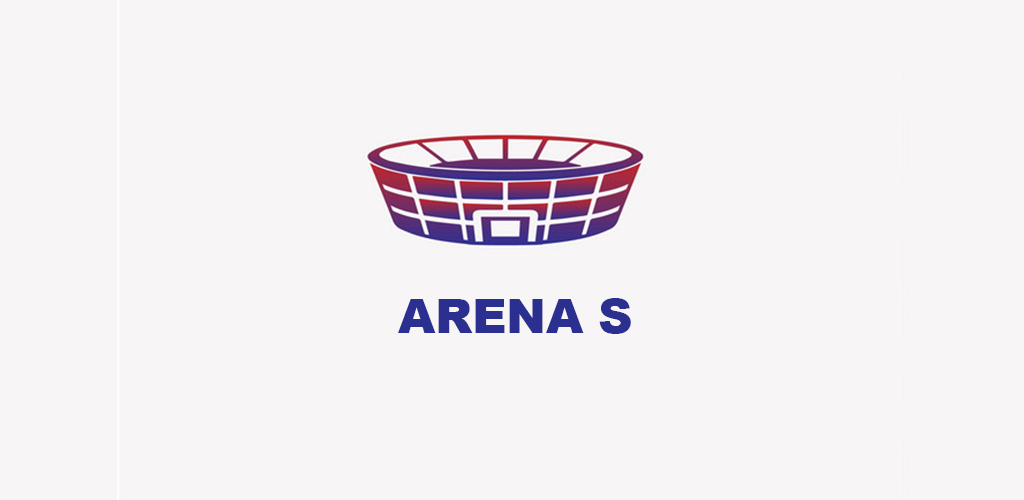
<style>
.page{position:relative;width:1024px;height:500px;background:#f7f5f6}
.page>*{position:absolute;margin:0}
.t1{font:47.6px "Arial-Black";color:#2b2f8f}
</style>
<div class="page">
<p class="t1" style="left:398px;top:298px;width:233px;height:36px">ARENA S</p>
</div>
